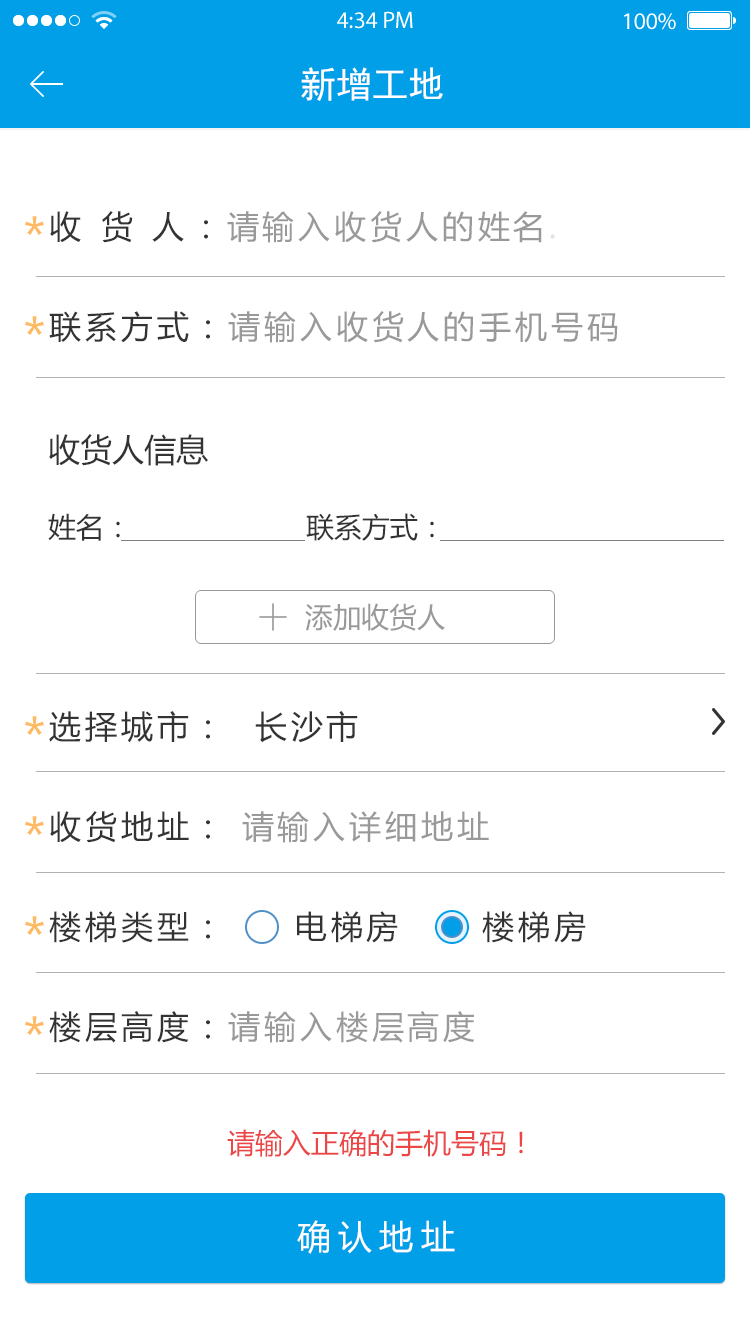
<style>
.page{position:relative;width:750px;height:1334px;background:#ffffff}
.page>*{position:absolute;margin:0}
.t1{font:36px "SimHei";color:#ffffff}
.t2{font:50px/100px "MicrosoftYaHei";letter-spacing:0.12em;color:#ffb963}
.t3{font:32px/100px "MicrosoftYaHei";letter-spacing:0.12em;color:#333333}
.t4{font:32px/100px "MicrosoftYaHei";letter-spacing:0.16em;color:#333333}
.t5{font:32px/100px "MicrosoftYaHei";letter-spacing:0.12em;color:#999999}
.t6{font:32px/100px "MicrosoftYaHei";letter-spacing:0.12em;color:#e1e1e1}
.t7{font:28px/80px "MicrosoftYaHei";color:#333333}
.t8{font:32px/80px "MicrosoftYaHei";color:#333333}
.t9{font:28px "MicrosoftYaHei";color:#999999}
.t10{font:28px "MicrosoftYaHei";color:#eb4747}
.t11{font:34px "MicrosoftYaHei";letter-spacing:0.22em;color:#ffffff}
</style>
<div class="page">
<p class="t1" style="left:301px;top:67px;width:142px;height:34px">新增工地</p>
<p class="t2" style="left:25px;top:216px;width:19px;height:819px">*<br>*<br><br><br><br>*<br>*<br>*<br>*</p>
<p class="t3" style="left:49px;top:211px;width:569px;height:832px"><span class="t4">收 货 人：</span><span class="t5">请输入收货人的姓名</span><span class="t6">.</span>                 <br>联系方式：<span class="t5">请输入收货人的手机号码<br></span><br><br><br>选择城市：  长沙市<br>收货地址： <span class="t5">请输入详细地址<br></span>楼梯类型：     电梯房      楼梯房<br>楼层高度：<span class="t5">请输入楼层高度</span></p>
<p class="t7" style="left:48px;top:434px;width:386px;height:107px"><span class="t8">收货人信息<br></span>姓名：                     联系方式：</p>
<p class="t9" style="left:305px;top:603px;width:140px;height:28px">添加收货人</p>
<p class="t10" style="left:227px;top:1129px;width:296px;height:28px">请输入正确的手机号码！</p>
<p class="t11" style="left:297px;top:1220px;width:158px;height:34px">确认地址</p>
</div>
